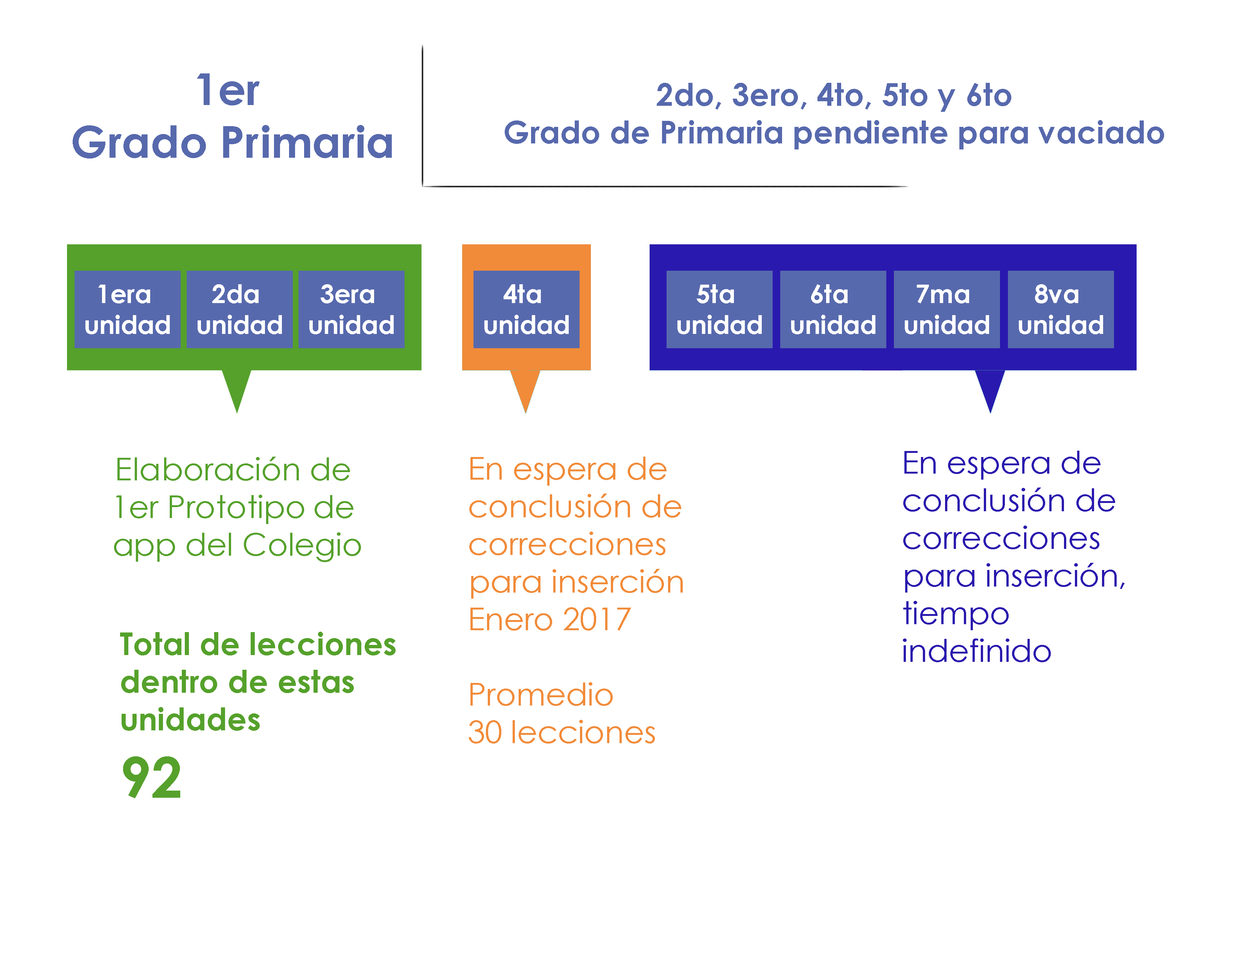
<style>
.page{position:relative;width:1242px;height:960px;background:#ffffff}
.page>*{position:absolute;margin:0}
.t1{font:43.9px "CenturyGothic-Bold";color:#5769ad}
.t2{font:31.4px "CenturyGothic-Bold";color:#5769ad}
.t3{font:25.6px "CenturyGothic-Bold";color:#ffffff}
.t4{font:31.4px "CenturyGothic";color:#55a12b}
.t5{font:31.4px "CenturyGothic";color:#f18b39}
.t6{font:31.4px "CenturyGothic";color:#2a19ae}
.t7{font:31.4px "CenturyGothic-Bold";color:#55a12b}
.t8{font:56.4px "CenturyGothic-Bold";color:#55a12b}
</style>
<div class="page">
<p class="t1" style="left:73px;top:73px;width:319px;height:85px;text-align:center">1er <br>Grado Primaria</p>
<p class="t2" style="left:505px;top:83px;width:659px;height:66px;text-align:center">2do, 3ero, 4to, 5to y 6to<br>Grado de Primaria pendiente para vaciado</p>
<p class="t3" style="left:85px;top:285px;width:85px;height:49px;text-align:center">1era <br>unidad</p>
<p class="t3" style="left:198px;top:284px;width:84px;height:50px;text-align:center">2da <br>unidad</p>
<p class="t3" style="left:309px;top:284px;width:85px;height:50px;text-align:center">3era <br>unidad</p>
<p class="t3" style="left:484px;top:284px;width:85px;height:50px;text-align:center">4ta <br>unidad</p>
<p class="t3" style="left:678px;top:284px;width:84px;height:50px;text-align:center">5ta <br>unidad</p>
<p class="t3" style="left:791px;top:284px;width:85px;height:50px;text-align:center">6ta <br>unidad</p>
<p class="t3" style="left:905px;top:285px;width:84px;height:49px;text-align:center">7ma <br>unidad</p>
<p class="t3" style="left:1019px;top:284px;width:84px;height:50px;text-align:center">8va <br>unidad</p>
<p class="t4" style="left:114px;top:457px;width:247px;height:105px;text-align:center">Elaboración de <br>1er Prototipo de <br>app del Colegio</p>
<p class="t5" style="left:469px;top:457px;width:214px;height:286px">En espera de <br>conclusión de <br>correcciones<br>para inserción<br>Enero 2017<br><br>Promedio <br>30 lecciones</p>
<p class="t6" style="left:903px;top:451px;width:222px;height:211px">En espera de <br>conclusión de <br>correcciones<br>para inserción, <br>tiempo <br>indefinido</p>
<p class="t7" style="left:120px;top:632px;width:276px;height:166px">Total de lecciones <br>dentro de estas <br>unidades <br><span class="t8">92</span></p>
</div>
